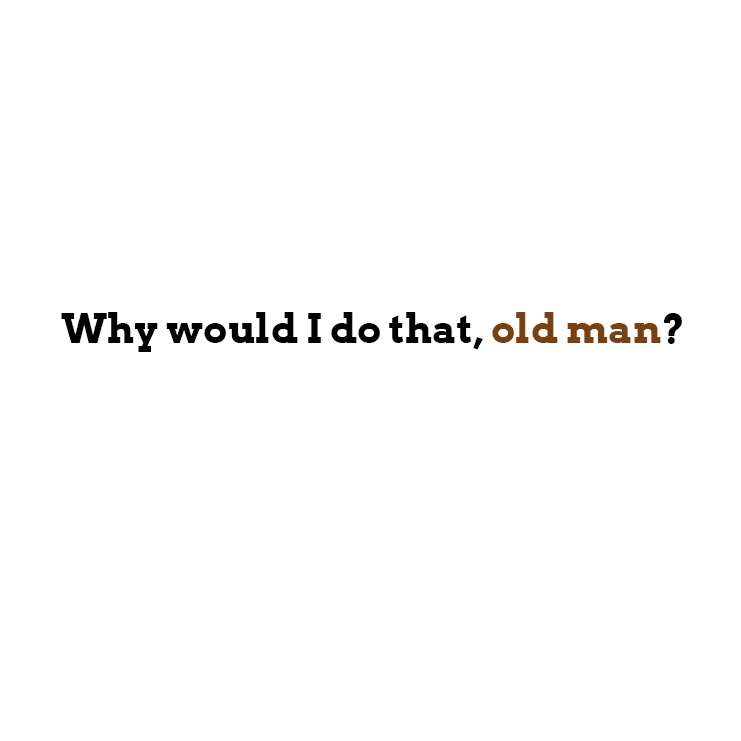
<style>
.page{position:relative;width:741px;height:741px;background:#ffffff}
.page>*{position:absolute;margin:0}
.t1{font:40px "Arvo-Bold";color:#000000}
.t2{font:40px "Arvo-Bold";color:#7a4010}
</style>
<div class="page">
<p class="t1" style="left:61px;top:312px;width:621px;height:40px">Why would I do that, <span class="t2">old man</span>?</p>
</div>
